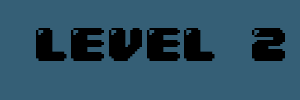
<style>
.page{position:relative;width:300px;height:100px;background:#355f76}
.page>*{position:absolute;margin:0}
.t1{font:40px "04b30";color:#000000}
</style>
<div class="page">
<p class="t1" style="left:36px;top:28px;width:249px;height:33px">LEVEL 2</p>
</div>
